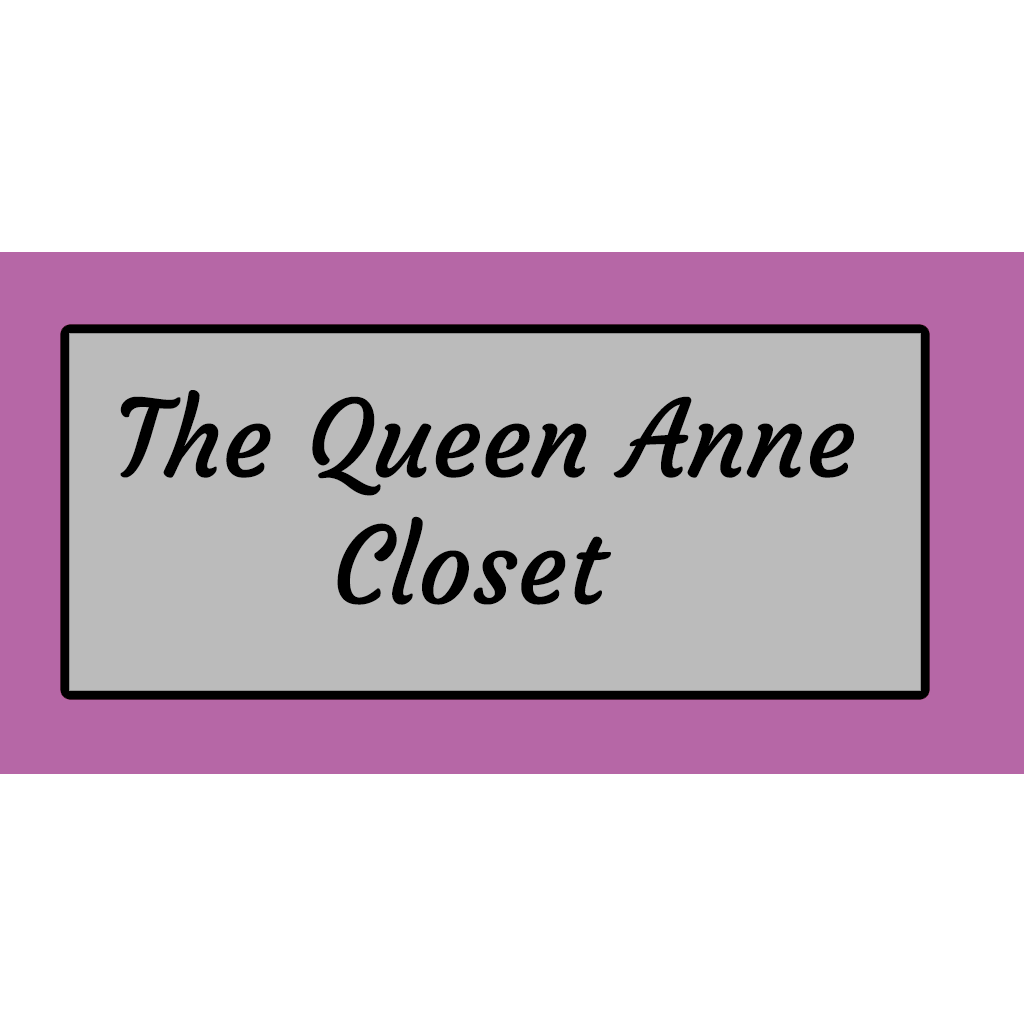
<style>
.page{position:relative;width:1024px;height:1024px;background:#ffffff}
.page>*{position:absolute;margin:0}
.t1{font:105.8px "Courgette-Regular";color:#000000}
</style>
<div class="page">
<p class="t1" style="left:120px;top:390px;width:734px;height:215px;text-align:center">The Queen Anne<br>Closet</p>
</div>
